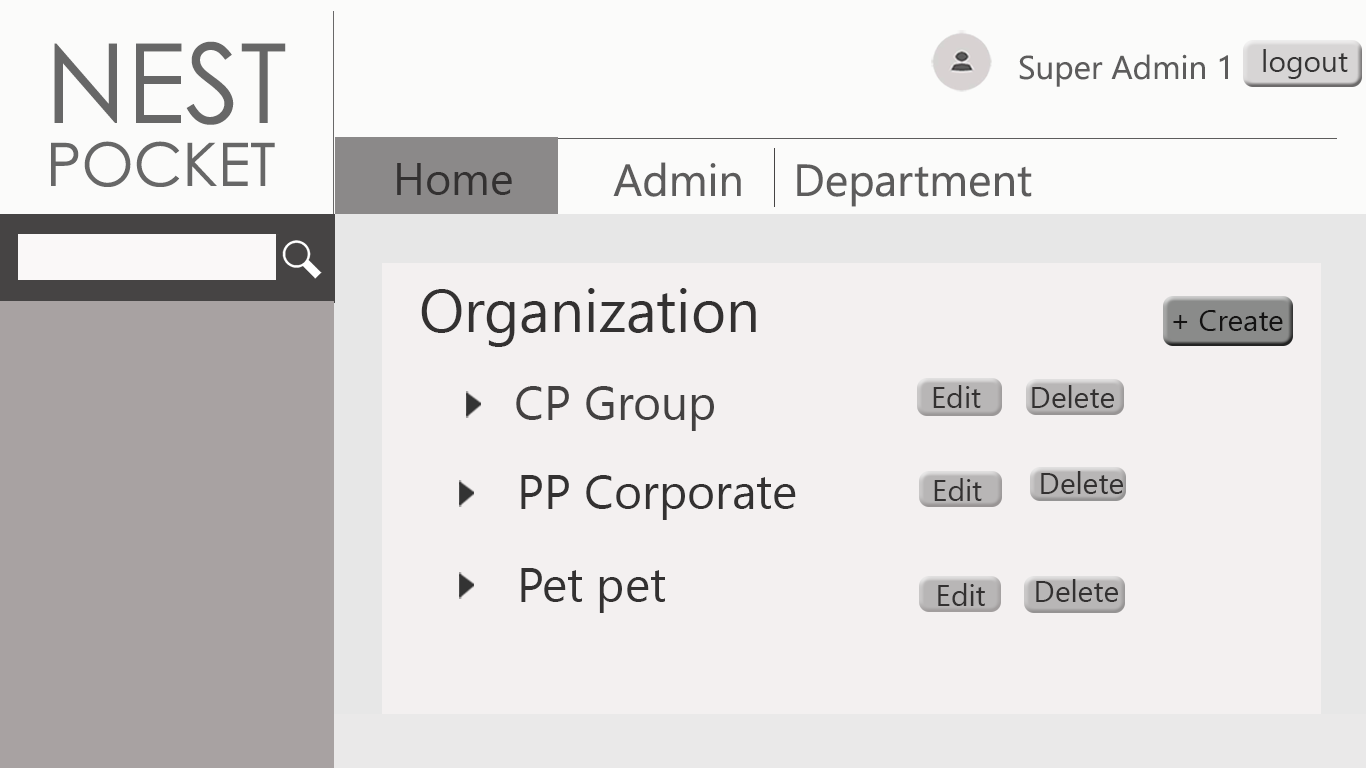
<style>
.page{position:relative;width:1366px;height:768px;background:#f3f0f0}
.page>*{position:absolute;margin:0}
.t1{font:110px "CenturyGothic";color:#676767}
.t2{font:90px "CenturyGothic";color:#676767}
.t3{font:33px "SegoeUI";color:#5d5c5c}
.t4{font:30px "SegoeUI";color:#353434}
.t5{font:60px "CenturyGothic";color:#676767}
.t6{font:45px "SegoeUI";color:#333131}
.t7{font:45px "SegoeUI";color:#5d5c5c}
.t8{font:60px "SegoeUI";color:#333131}
.t9{font:30px "SegoeUI";color:#131212}
.t10{font:48px "SegoeUI";color:#434141}
.t11{font:30px "SegoeUI";color:#333131}
.t12{font:48px "SegoeUI";color:#333131}
</style>
<div class="page">
<p class="t1" style="left:54px;top:41px;width:232px;height:84px"><span class="t2"><br></span>NEST</p>
<p class="t3" style="left:1019px;top:54px;width:209px;height:33px">Super Admin 1</p>
<p class="t4" style="left:1263px;top:49px;width:85px;height:30px">logout</p>
<p class="t5" style="left:51px;top:141px;width:224px;height:46px">POCKET</p>
<p class="t6" style="left:397px;top:163px;width:115px;height:32px">Home</p>
<p class="t7" style="left:398px;top:162px;width:634px;height:45px">Home        Admin    Department</p>
<p class="t8" style="left:421px;top:288px;width:335px;height:59px">Organization</p>
<p class="t9" style="left:1173px;top:310px;width:110px;height:21px">+ Create</p>
<p class="t10" style="left:516px;top:386px;width:198px;height:45px">CP Group</p>
<p class="t11" style="left:933px;top:385px;width:48px;height:23px">Edit</p>
<p class="t11" style="left:1032px;top:385px;width:82px;height:23px">Delete</p>
<p class="t11" style="left:1041px;top:471px;width:82px;height:23px">Delete</p>
<p class="t12" style="left:521px;top:475px;width:275px;height:45px">PP Corporate</p>
<p class="t11" style="left:934px;top:478px;width:48px;height:23px">Edit</p>
<p class="t12" style="left:521px;top:568px;width:144px;height:45px">Pet pet</p>
<p class="t11" style="left:1036px;top:579px;width:82px;height:23px">Delete</p>
<p class="t11" style="left:938px;top:583px;width:47px;height:23px">Edit</p>
</div>
